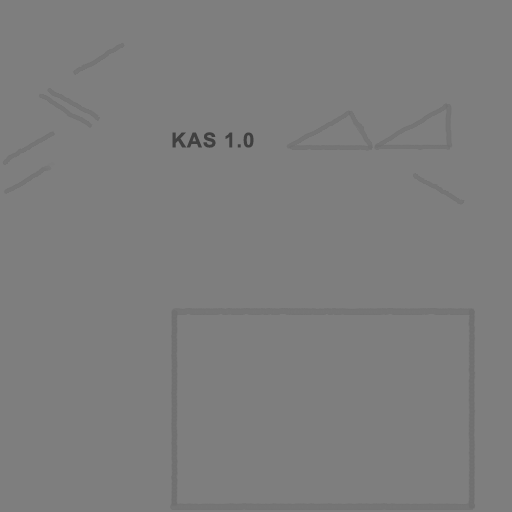
<style>
.page{position:relative;width:512px;height:512px;background:#7e7e7e}
.page>*{position:absolute;margin:0}
.t1{font:20.3px "Arial-BoldMT";letter-spacing:0.04em;color:#404040}
</style>
<div class="page">
<p class="t1" style="left:172px;top:132px;width:82px;height:16px">KAS 1.0</p>
</div>
